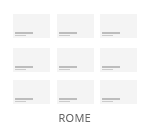
<style>
.page{position:relative;width:150px;height:130px;background:#ffffff}
.page>*{position:absolute;margin:0}
.t1{font:11px "OpenSans";color:#686868;text-transform:uppercase}
</style>
<div class="page">
<p class="t1" style="left:59px;top:114px;width:32px;height:8px">Rome</p>
</div>
